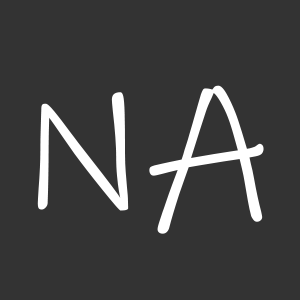
<style>
.page{position:relative;width:300px;height:300px;background:#333333}
.page>*{position:absolute;margin:0}
.t1{font:46.9px "InkFree";color:#ffffff}
</style>
<div class="page">
<p class="t1" style="left:37px;top:85px;width:227px;height:149px;text-align:center">NA</p>
</div>
